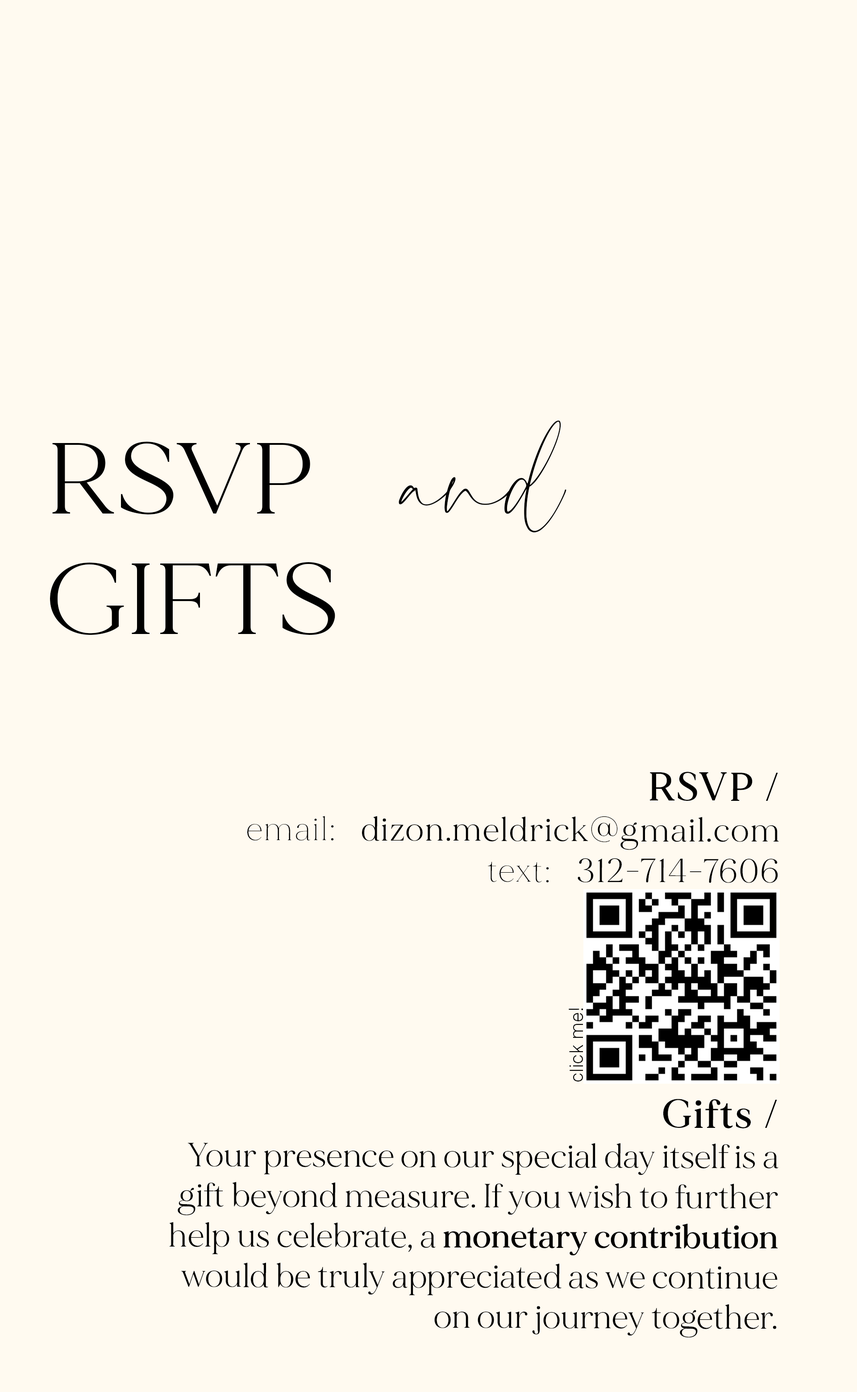
<style>
.page{position:relative;width:857px;height:1392px;background:#fffaf0}
.page>*{position:absolute;margin:0}
.t1{font:100.5px "MADEMirage";color:#000000;scale:1.09 1}
.t2{font:125.6px "Charlotte";color:#000000;scale:1.09 1}
.t3{font:33.5px "MADEMirage";color:#000000}
.t4{font:40.2px/40.9px "MADEMirage";letter-spacing:0.04em;color:#000000}
.t5{font:40.2px/40.9px "MADEMirage-Medium";letter-spacing:0.04em;color:#000000}
.t6{font:33.5px/40.9px "MADEMirage-Thin";letter-spacing:0.04em;color:#000000}
.t7{font:33.5px/40.9px "MADEMirage";letter-spacing:0.04em;color:#000000}
.t8{font:33.5px "MADEMirage-Medium";color:#000000}
.t9{font:19px "MetroSans-Light";color:#000000}
</style>
<div class="page">
<p class="t1" style="left:50px;top:420px;width:516px;height:215px">RSVP   <span class="t2">and<br></span>GIFTS</p>
<p class="t3" style="left:169px;top:772px;width:610px;height:566px;text-align:right"><span class="t4"> </span><span class="t5">RSVP /<br></span><span class="t6">email:</span><span class="t7">   dizon.meldrick@gmail.com<br></span><span class="t6">text:   </span><span class="t7">312-714-7606<br><br><br><br><br><br></span><span class="t5">Gifts /<br></span>Your presence on our special day itself is a gift beyond measure. If you wish to further help us celebrate, a <span class="t8">monetary contribution</span> would be truly appreciated as we continue on our journey together.</p>
<p class="t9" style="left:568px;top:1008px;width:15px;height:73px;rotate:-90deg">click me!</p>
</div>
